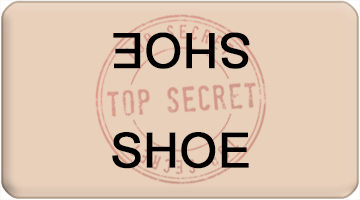
<style>
.page{position:relative;width:360px;height:200px;background:#e8d0bb}
.page>*{position:absolute;margin:0}
.t1{font:48px "ArialMT";color:#000000;font-weight:bold}
</style>
<div class="page">
<p class="t1" style="left:113px;top:32px;width:137px;height:37px;rotate:180deg">SHOE</p>
<p class="t1" style="left:112px;top:132px;width:137px;height:37px">SHOE</p>
</div>
